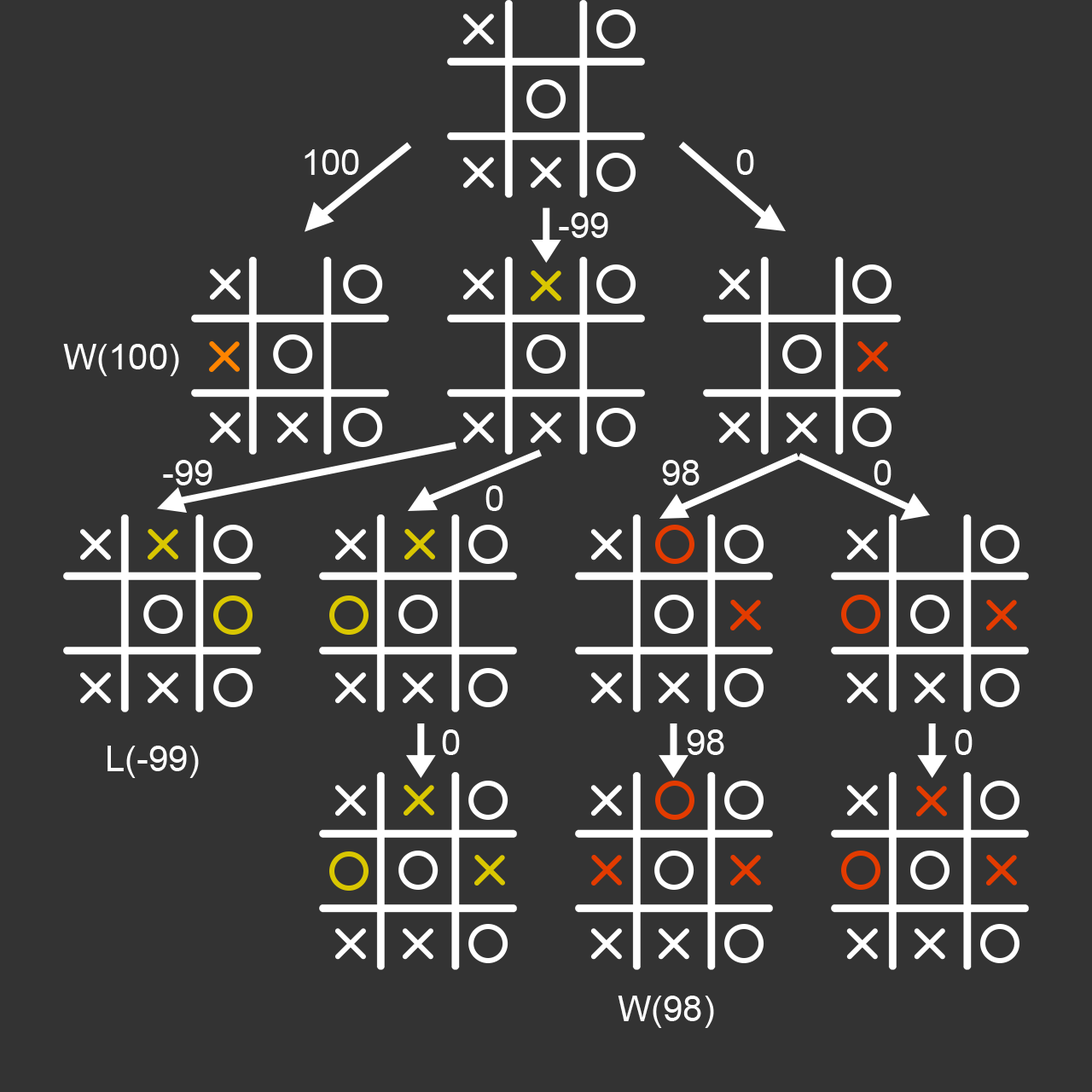
<style>
.page{position:relative;width:1092px;height:1092px;background:#333333}
.page>*{position:absolute;margin:0}
.t1{font:35.5px "ArialMT";color:#ffffff}
</style>
<div class="page">
<p class="t1" style="left:305px;top:149px;width:54px;height:26px">100</p>
<p class="t1" style="left:736px;top:149px;width:18px;height:26px">0</p>
<p class="t1" style="left:559px;top:212px;width:49px;height:26px">-99</p>
<p class="t1" style="left:63px;top:344px;width:116px;height:32px">W(100)</p>
<p class="t1" style="left:163px;top:460px;width:49px;height:25px">-99</p>
<p class="t1" style="left:662px;top:460px;width:38px;height:25px">98</p>
<p class="t1" style="left:874px;top:460px;width:18px;height:25px">0</p>
<p class="t1" style="left:485px;top:485px;width:18px;height:26px">0</p>
<p class="t1" style="left:442px;top:729px;width:18px;height:26px">0</p>
<p class="t1" style="left:687px;top:729px;width:37px;height:26px">98</p>
<p class="t1" style="left:955px;top:729px;width:18px;height:26px">0</p>
<p class="t1" style="left:107px;top:746px;width:92px;height:32px">L(-99)</p>
<p class="t1" style="left:618px;top:996px;width:96px;height:32px">W(98)</p>
</div>
